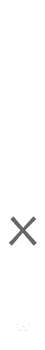
<style>
.page{position:relative;width:45px;height:350px;background:#ffffff}
.page>*{position:absolute;margin:0}
.t1{font:48px "LithosPro-Regular";color:#666666}
</style>
<div class="page">
<p class="t1" style="left:8px;top:216px;width:29px;height:30px">x</p>
</div>
